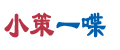
<style>
.page{position:relative;width:120px;height:50px;background:#ffffff}
.page>*{position:absolute;margin:0}
.t1{font:37.5px "LiSu";color:#b73446;font-weight:bold;scale:0.67 1}
.t2{font:37.5px "LiSu";color:#0060ae;font-weight:bold;scale:0.67 1}
</style>
<div class="page">
<p class="t1" style="left:4px;top:12px;width:102px;height:26px">小策<span class="t2">一喋</span></p>
</div>
